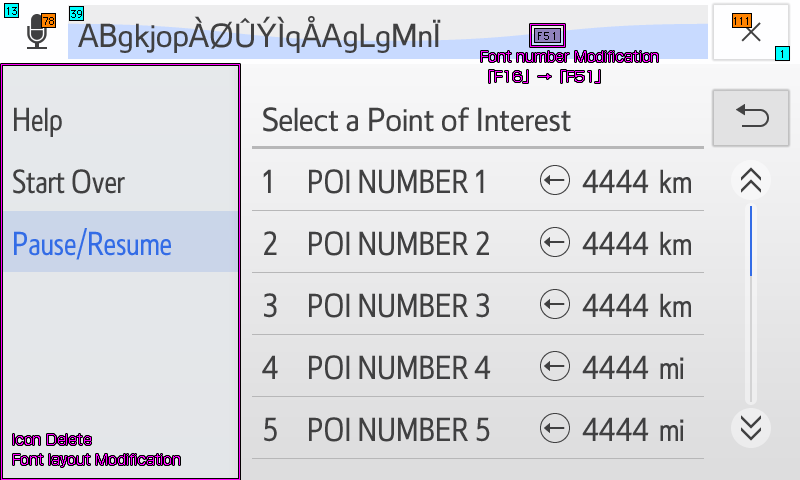
<style>
.page{position:relative;width:800px;height:480px}
.page>*{position:absolute;margin:0}
.t1{font:30px "Tfont1502_T1S";color:#404041}
.t2{font:14px/20px "ShinGoPro-Regular";color:#ff00ff}
.t3{font:30px "Tfont1502_T2S";color:#404041}
.t4{font:30px "Tfont1502_T1S";color:#404040}
.t5{font:30px/62px "Tfont1502_T2S";color:#404040}
.t6{font:30px "Tfont1502_T2S";color:#336ce6}
</style>
<div class="page">
<p class="t1" style="left:78px;top:16px;width:363px;height:37px">ABgkjopÀØÛÝÌqÅAgLgMnÏ</p>
<p class="t2" style="left:481px;top:51px;width:177px;height:32px">Font number Modification<br>「F16」→「F51」</p>
<p class="t3" style="left:14px;top:107px;width:48px;height:30px">Help</p>
<p class="t4" style="left:263px;top:107px;width:308px;height:25px">Select a Point of Interest</p>
<p class="t3" style="left:13px;top:169px;width:112px;height:25px">Start Over</p>
<p class="t5" style="left:262px;top:169px;width:16px;height:273px">1<br>2<br>3<br>4<br>5</p>
<p class="t5" style="left:309px;top:169px;width:182px;height:273px">POI NUMBER 1<br>POI NUMBER 2<br>POI NUMBER 3<br>POI NUMBER 4<br>POI NUMBER 5</p>
<p class="t5" style="left:582px;top:169px;width:67px;height:272px;text-align:right">4444<br>4444<br>4444<br>4444<br>4444</p>
<p class="t5" style="left:660px;top:169px;width:31px;height:272px">km<br>km<br>km<br>mi<br>mi</p>
<p class="t6" style="left:14px;top:228px;width:157px;height:32px">Pause/Resume</p>
<p class="t2" style="left:13px;top:434px;width:167px;height:33px">Icon Delete<br>Font layout Modification</p>
</div>
